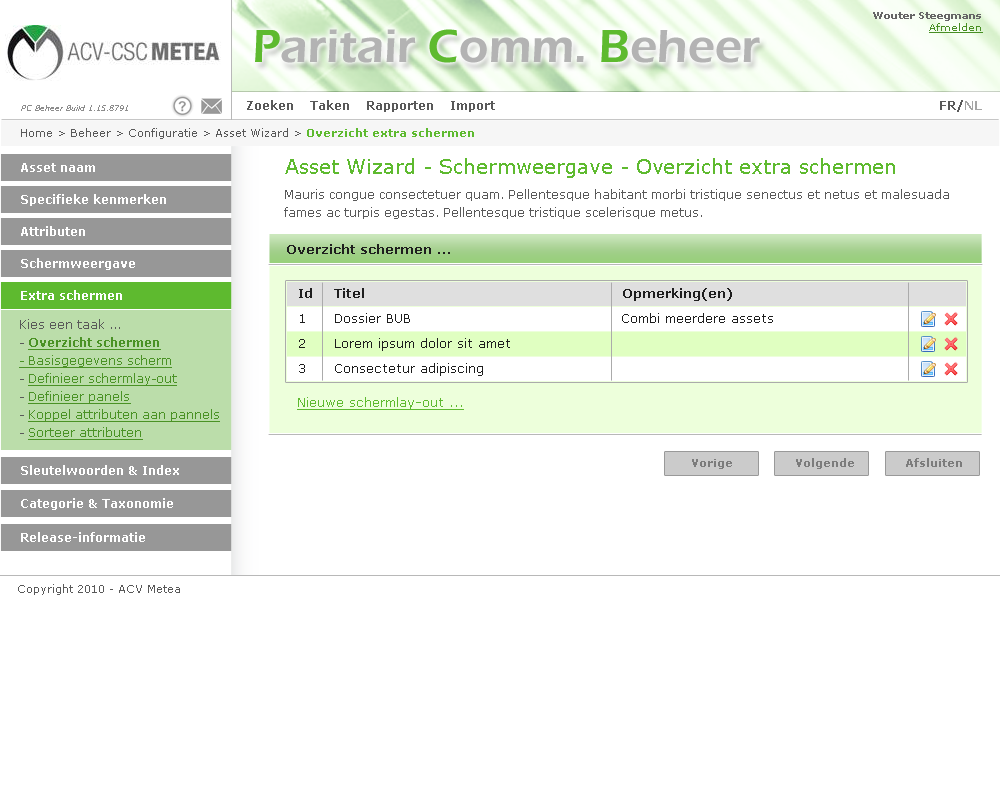
<style>
.page{position:relative;width:1000px;height:800px;background:#ffffff}
.page>*{position:absolute;margin:0}
.t1{font:10px "Verdana-Bold";color:#666666}
.t2{font:10px "Verdana";color:#488f24;text-decoration:underline}
.t3{font:48px "ErasITC-Demi";color:#b3b3b3}
.t4{font:48px "ErasITC-Demi";color:#5eba2f}
.t5{font:12px "Verdana-Bold";color:#595959}
.t6{font:12px "Verdana-Bold";color:#a4a4a4}
.t7{font:8px "Verdana-Italic";color:#8c8c8c}
.t8{font:11px "Verdana";color:#595959}
.t9{font:11px "Verdana-Bold";color:#5eba2f}
.t10{font:20px "Verdana";color:#5eba2f}
.t11{font:12px "Verdana-Bold";color:#ffffff}
.t12{font:12px/18px "Verdana";color:#595959}
.t13{font:13px "Verdana-Bold";color:#1e1e1e}
.t14{font:13px/25px "Verdana";color:#1e1e1e}
.t15{font:13px/25px "Verdana-Bold";color:#1e1e1e}
.t16{font:12px/18px "Verdana";color:#4a9225;text-decoration:underline}
.t17{font:12px/18px "Verdana-Bold";color:#4a9225;text-decoration:underline}
.t18{font:13px "Verdana";color:#5eba2f;text-decoration:underline}
.t19{font:11px "Verdana-Bold";color:#7c7c7c}
</style>
<div class="page">
<p class="t1" style="left:873px;top:12px;width:110px;height:21px;text-align:right">Wouter Steegmans<br><span class="t2">Afmelden</span></p>
<p class="t3" style="left:255px;top:29px;width:505px;height:34px"><span class="t4">P</span>aritair <span class="t4">C</span>omm. <span class="t4">B</span>eheer</p>
<p class="t5" style="left:247px;top:100px;width:248px;height:12px">Zoeken    Taken    Rapporten    Import</p>
<p class="t5" style="left:940px;top:100px;width:42px;height:12px">FR/<span class="t6">NL</span></p>
<p class="t7" style="left:21px;top:105px;width:107px;height:6px">PC Beheer Build 1.15.8791</p>
<p class="t8" style="left:21px;top:128px;width:453px;height:11px">Home &gt; Beheer &gt; Configuratie &gt; Asset Wizard &gt; <span class="t9">Overzicht extra schermen</span></p>
<p class="t10" style="left:285px;top:158px;width:610px;height:20px">Asset Wizard - Schermweergave - Overzicht extra schermen</p>
<p class="t11" style="left:21px;top:163px;width:74px;height:9px">Asset naam</p>
<p class="t11" style="left:21px;top:194px;width:145px;height:12px">Specifieke kenmerken</p>
<p class="t12" style="left:284px;top:189px;width:665px;height:30px">Mauris congue consectetuer quam. Pellentesque habitant morbi tristique senectus et netus et malesuada <br>fames ac turpis egestas. Pellentesque tristique scelerisque metus.</p>
<p class="t11" style="left:21px;top:226px;width:64px;height:10px">Attributen</p>
<p class="t13" style="left:287px;top:244px;width:163px;height:10px">Overzicht schermen ...</p>
<p class="t11" style="left:21px;top:258px;width:114px;height:12px">Schermweergave</p>
<p class="t11" style="left:21px;top:290px;width:101px;height:10px">Extra schermen</p>
<p class="t14" style="left:299px;top:288px;width:474px;height:88px"><span class="t15">Id Titel        Opmerking(en)<br></span>1 Dossier BUB                                          Combi meerdere assets<br>2 Lorem ipsum dolor sit amet<br>3 Consectetur adipiscing</p>
<p class="t16" style="left:19px;top:319px;width:201px;height:121px"><span class="t12">Kies een taak ...<br>- </span><span class="t17">Overzicht schermen<br></span>- Basisgegevens scherm<br><span class="t12">- </span>Definieer schermlay-out<br><span class="t12">- </span>Definieer panels<br><span class="t12">- </span>Koppel attributen aan pannels<br><span class="t12">- </span>Sorteer attributen</p>
<p class="t18" style="left:297px;top:397px;width:167px;height:13px">Nieuwe schermlay-out ...</p>
<p class="t19" style="left:692px;top:459px;width:40px;height:10px">Vorige</p>
<p class="t19" style="left:796px;top:458px;width:58px;height:11px">Volgende</p>
<p class="t19" style="left:906px;top:458px;width:56px;height:9px">Afsluiten</p>
<p class="t11" style="left:21px;top:465px;width:158px;height:10px">Sleutelwoorden &amp; Index</p>
<p class="t11" style="left:21px;top:498px;width:152px;height:12px">Categorie &amp; Taxonomie</p>
<p class="t11" style="left:21px;top:532px;width:124px;height:10px">Release-informatie</p>
<p class="t8" style="left:18px;top:584px;width:162px;height:11px">Copyright 2010 - ACV Metea</p>
</div>
